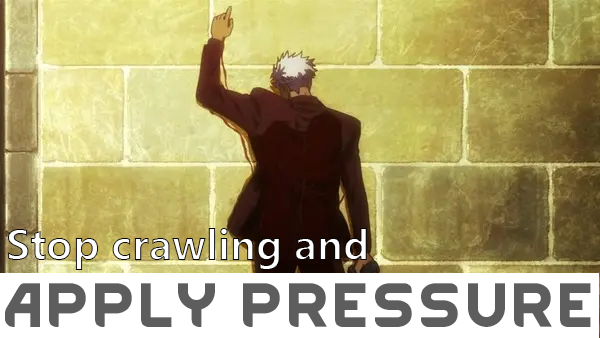
<style>
.page{position:relative;width:600px;height:338px}
.page>*{position:absolute;margin:0}
.t1{font:40px "MicrosoftYaHei-Bold"}
.t2{font:53px "RimWordFont";color:#5d5d5d}
</style>
<div class="page">
<p class="t1" style="left:8px;top:228px;width:359px;height:42px">Stop crawling and</p>
<p class="t2" style="left:5px;top:283px;width:586px;height:44px">Apply Pressure</p>
</div>
